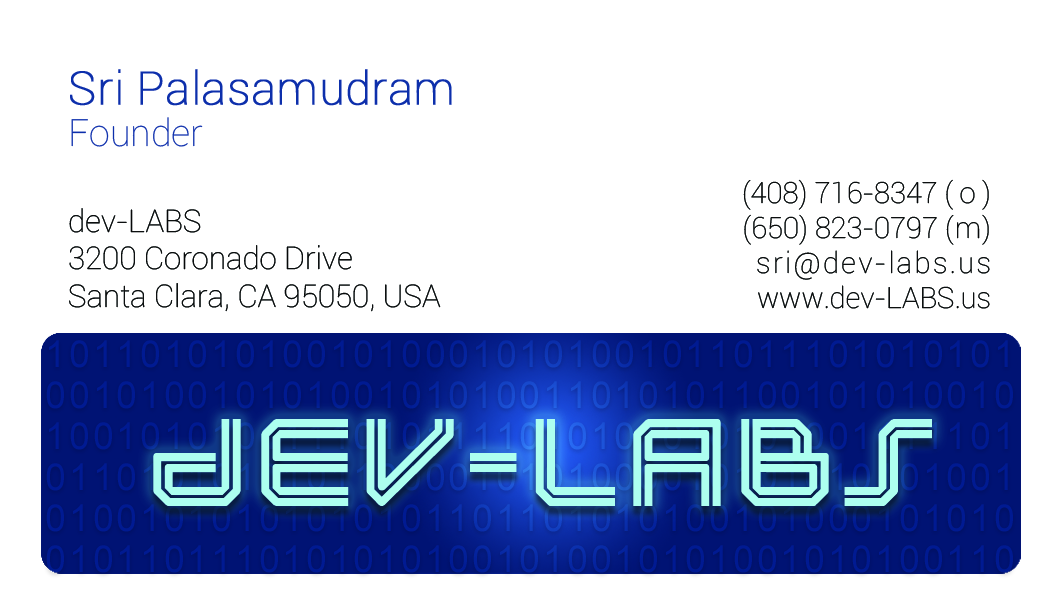
<style>
.page{position:relative;width:1062px;height:615px;background:#ffffff}
.page>*{position:absolute;margin:0}
.t1{font:45.8px/41.7px "Roboto-Thin";color:#0d2fab;font-weight:bold}
.t2{font:37.5px/41.7px "Roboto-Thin";color:#0d2fab}
.t3{font:29.2px "Roboto-Thin";letter-spacing:0.08em;color:#060808}
.t4{font:29.2px "Roboto-Thin";color:#060808}
.t5{font:29.2px "Roboto-Thin";letter-spacing:0.22em;color:#060808}
.t6{font:29.2px "Roboto-Thin";letter-spacing:0.04em;color:#060808}
.t7{font:31.2px "Roboto-Thin";color:#060808}
</style>
<div class="page">
<p class="t1" style="left:70px;top:69px;width:382px;height:78px">Sri Palasamudram<br><span class="t2">Founder</span></p>
<p class="t3" style="left:743px;top:179px;width:247px;height:130px;text-align:right"><span class="t4"> (408) 716-8347 </span><span class="t5">(o)<br></span><span class="t4">(650) 823-0797 </span><span class="t6">(m)<br></span>sri@dev-labs.us<br><span class="t4">www.dev-LABS.us</span></p>
<p class="t7" style="left:69px;top:208px;width:372px;height:104px">dev-LABS<br>3200 Coronado Drive<br>Santa Clara, CA 95050, USA</p>
</div>
